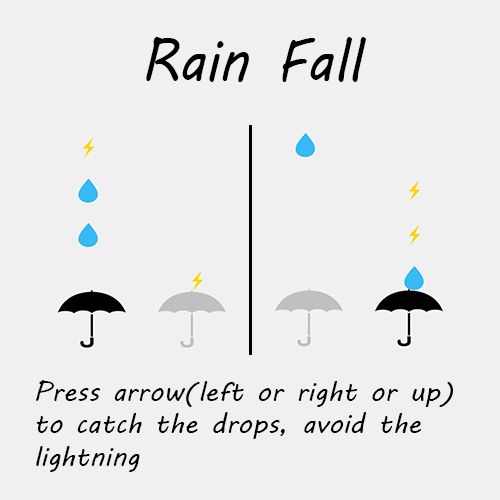
<style>
.page{position:relative;width:500px;height:500px;background:#f0f0f0}
.page>*{position:absolute;margin:0}
.t1{font:60px "MVBoli";color:#000000;scale:0.92 1}
.t2{font:27.3px "MVBoli";color:#000000}
</style>
<div class="page">
<p class="t1" style="left:146px;top:37px;width:220px;height:45px">Rain Fall</p>
<p class="t2" style="left:36px;top:380px;width:417px;height:92px;text-align:right">Press arrow(left or right or up) to catch the drops, avoid the<br>lightning</p>
</div>
